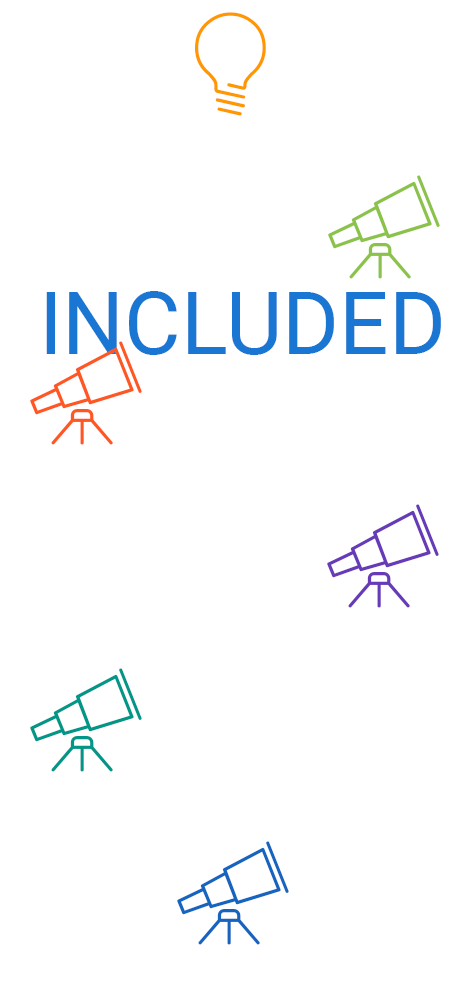
<style>
.page{position:relative;width:476px;height:1000px;background:#ffffff}
.page>*{position:absolute;margin:0}
.t1{font:87px "Roboto-Regular";color:#1976d2;text-transform:uppercase}
</style>
<div class="page">
<p class="t1" style="left:46px;top:291px;width:395px;height:64px">included</p>
</div>
